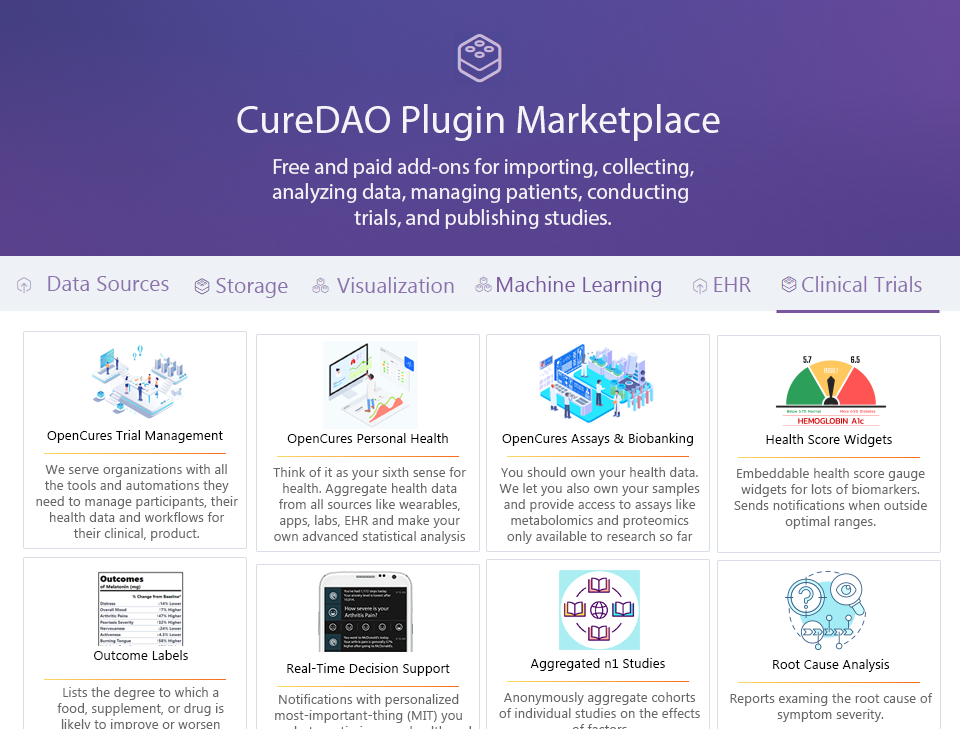
<style>
.page{position:relative;width:960px;height:729px;background:#ffffff}
.page>*{position:absolute;margin:0}
.t1{font:40px "MyriadPro-Regular";color:#f5f3f8}
.t2{font:21.3px "MyriadPro-Regular";color:#f5f3f8}
.t3{font:21.3px "MyanmarText";color:#8b72ac}
.t4{font:21.3px "MyanmarText";color:#79589f}
.t5{font:13.3px "MyanmarText";color:#000000}
.t6{font:13.3px "MyanmarText";color:#676767}
.t7{font:13.3px "MyanmarText";color:#090909}
</style>
<div class="page">
<p class="t1" style="left:237px;top:104px;width:483px;height:37px">CureDAO Plugin Marketplace</p>
<p class="t2" style="left:272px;top:158px;width:422px;height:71px;text-align:center">Free and paid add-ons for importing, collecting,<br>analyzing data, managing patients, conducting <br>trials, and publishing studies.</p>
<p class="t3" style="left:48px;top:276px;width:121px;height:15px">Data Sources</p>
<p class="t3" style="left:216px;top:278px;width:72px;height:20px">Storage</p>
<p class="t3" style="left:337px;top:277px;width:117px;height:16px">Visualization</p>
<p class="t4" style="left:497px;top:276px;width:164px;height:21px">Machine Learning</p>
<p class="t3" style="left:714px;top:277px;width:37px;height:15px">EHR</p>
<p class="t3" style="left:802px;top:276px;width:120px;height:16px">Clinical Trials</p>
<p class="t5" style="left:47px;top:430px;width:176px;height:13px">OpenCures Trial Management</p>
<p class="t5" style="left:287px;top:433px;width:161px;height:13px">OpenCures Personal Health</p>
<p class="t5" style="left:287px;top:433px;width:161px;height:13px">OpenCures Personal Health</p>
<p class="t5" style="left:502px;top:433px;width:191px;height:13px">OpenCures Assays &amp; Biobanking</p>
<p class="t5" style="left:766px;top:434px;width:126px;height:13px">Health Score Widgets</p>
<p class="t6" style="left:36px;top:464px;width:202px;height:77px;text-align:center">We serve organizations with all the tools and automations they need to manage participants, their health data and workflows for their clinical, product.</p>
<p class="t6" style="left:273px;top:467px;width:193px;height:77px;text-align:center">Think of it as your sixth sense for health. Aggregate health data from all sources like wearables, apps, labs, EHR and make your own advanced statistical analysis &lt;br&gt;or use our automated analysis</p>
<p class="t6" style="left:273px;top:467px;width:193px;height:77px;text-align:center">Think of it as your sixth sense for health. Aggregate health data from all sources like wearables, apps, labs, EHR and make your own advanced statistical analysis &lt;br&gt;or use our automated analysis</p>
<p class="t6" style="left:499px;top:467px;width:201px;height:77px;text-align:center">You should own your health data. We let you also own your samples and provide access to assays like metabolomics and proteomics only available to research so far</p>
<p class="t6" style="left:734px;top:468px;width:193px;height:61px;text-align:center">Embeddable health score gauge widgets for lots of biomarkers. Sends notifications when outside optimal ranges.</p>
<p class="t7" style="left:94px;top:650px;width:94px;height:10px">Outcome Labels</p>
<p class="t5" style="left:287px;top:663px;width:163px;height:13px">Real-Time Decision Support</p>
<p class="t5" style="left:530px;top:658px;width:135px;height:13px">Aggregated n1 Studies</p>
<p class="t5" style="left:773px;top:659px;width:117px;height:13px">Root Cause Analysis</p>
<p class="t6" style="left:730px;top:693px;width:203px;height:29px;text-align:center">Reports examing the root cause of symptom severity.</p>
</div>
